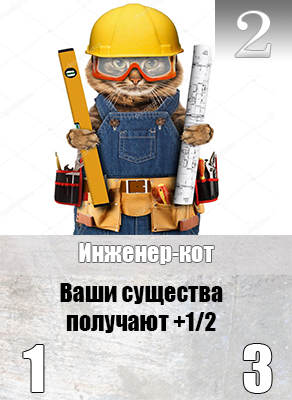
<style>
.page{position:relative;width:292px;height:400px;background:#ffffff}
.page>*{position:absolute;margin:0}
.t1{font:65.6px "Century";color:#ffffff;scale:1.18 1}
.t2{font:24px "Impact";color:#ffffff}
.t3{font:24px "Impact";color:#000000}
</style>
<div class="page">
<p class="t1" style="left:235px;top:11px;width:36px;height:46px">2</p>
<p class="t2" style="left:79px;top:243px;width:135px;height:21px">Инженер-кот</p>
<p class="t3" style="left:60px;top:283px;width:163px;height:50px;text-align:center">Ваши существа получают +1/2</p>
</div>
